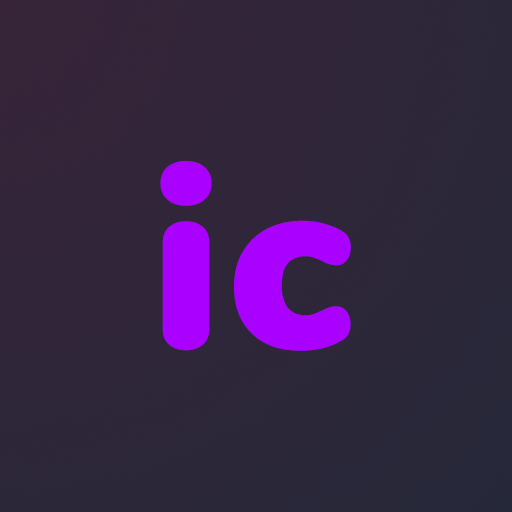
<style>
.page{position:relative;width:512px;height:512px}
.page>*{position:absolute;margin:0}
.t1{font:250px "Nunito-Black";color:#aa00ff;font-weight:bold}
</style>
<div class="page">
<p class="t1" style="left:160px;top:161px;width:191px;height:190px">ic</p>
</div>
